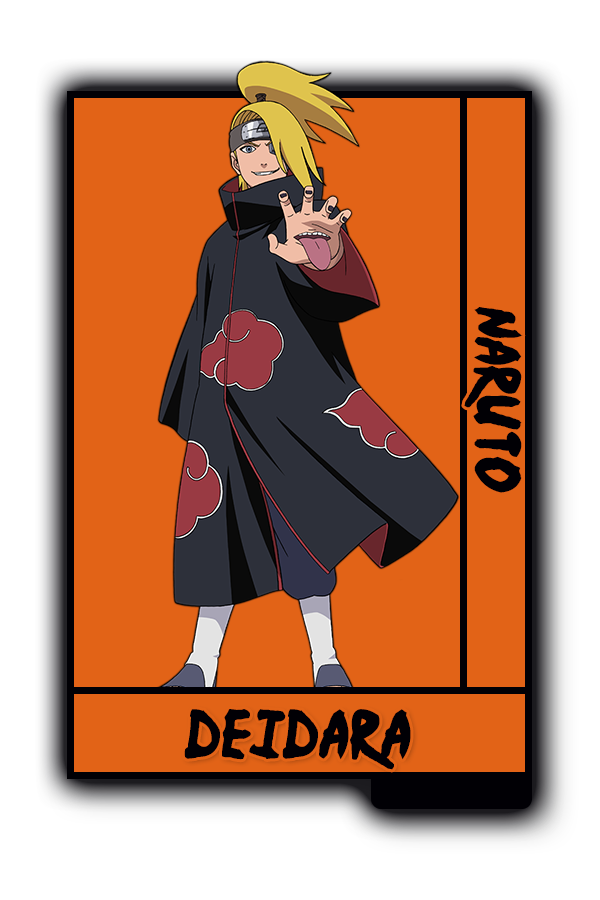
<style>
.page{position:relative;width:600px;height:900px;background:#e26317}
.page>*{position:absolute;margin:0}
.t1{font:52px "Ninja-Naruto";color:#010005}
.t2{font:55.4px "Ninja-Naruto";color:#010005}
</style>
<div class="page">
<p class="t1" style="left:464px;top:307px;width:59px;height:186px;rotate:90deg">Naruto</p>
<p class="t2" style="left:184px;top:709px;width:227px;height:61px">Deidara</p>
</div>
